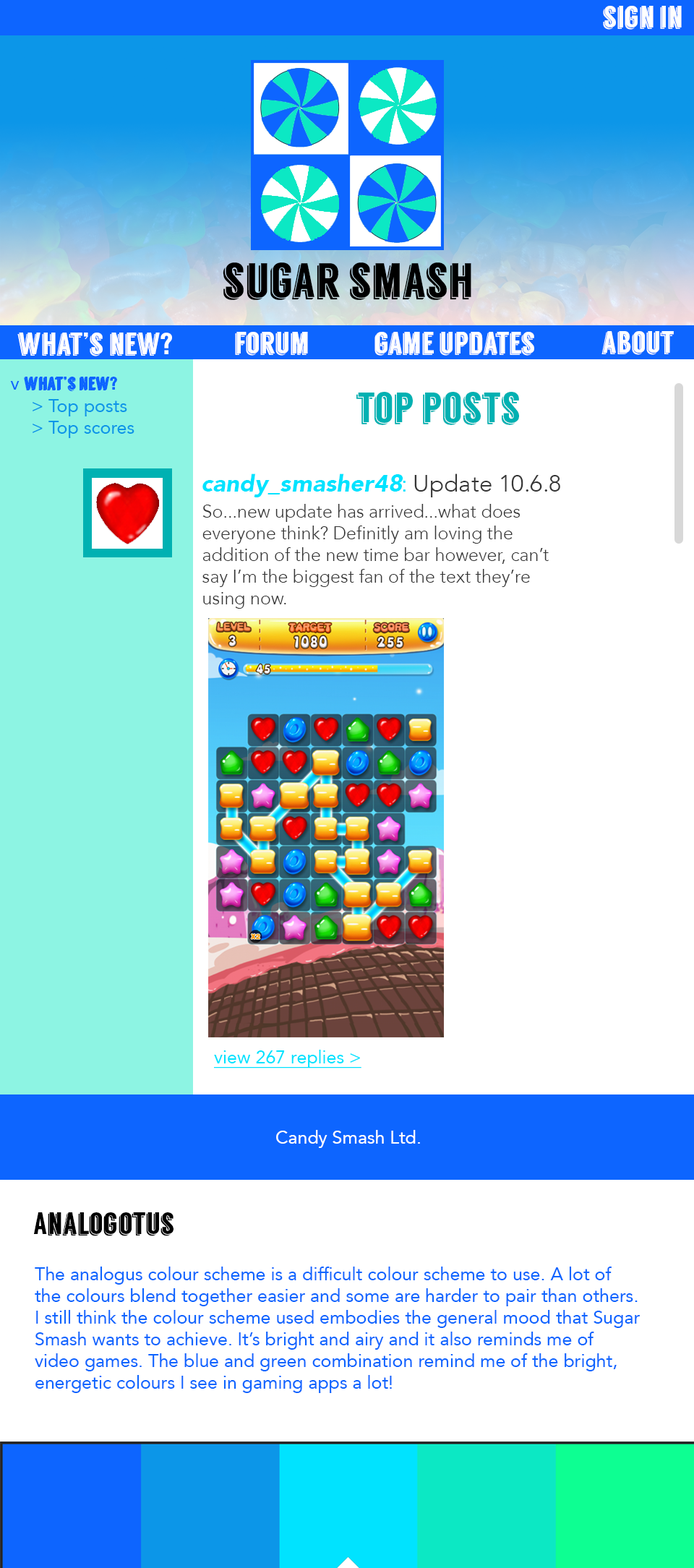
<style>
.page{position:relative;width:694px;height:1568px;background:#ffffff}
.page>*{position:absolute;margin:0}
.t1{font:30.1px "Langdon";color:#fefefe}
.t2{font:48.2px "Langdon";color:#000000}
.t3{font:30.1px "Langdon";color:#ffffff}
.t4{font:18.1px "Langdon";color:#0d65ff}
.t5{font:18.1px "Avenir-Roman";color:#0d65ff}
.t6{font:18.1px "Avenir-Roman";color:#0c96e8}
.t7{font:42.2px "Langdon";color:#00b1b2}
.t8{font:24.1px "Avenir-BlackOblique";color:#00e3ff}
.t9{font:24.1px "Cabin-Regular";color:#00e3ff}
.t10{font:24.1px "Avenir-Light";color:#363636}
.t11{font:18.1px "Avenir-Light";color:#363636}
.t12{font:18.1px "Avenir-Roman";color:#00e3ff;text-decoration:underline}
.t13{font:18.1px "Avenir-Roman";color:#ffffff}
.t14{font:30.1px "Langdon";color:#000000}
</style>
<div class="page">
<p class="t1" style="left:603px;top:6px;width:79px;height:24px">sign in</p>
<p class="t2" style="left:223px;top:262px;width:248px;height:38px">sugar smash</p>
<p class="t3" style="left:17px;top:333px;width:155px;height:23px">what’s new?</p>
<p class="t3" style="left:235px;top:332px;width:73px;height:24px">forum</p>
<p class="t3" style="left:374px;top:332px;width:160px;height:24px">game updates</p>
<p class="t3" style="left:601px;top:331px;width:73px;height:24px">about</p>
<p class="t4" style="left:10px;top:377px;width:107px;height:14px"><span class="t5">v </span>what’s new?</p>
<p class="t6" style="left:33px;top:399px;width:101px;height:39px">&gt; Top posts<br>&gt; Top scores</p>
<p class="t7" style="left:356px;top:392px;width:163px;height:33px">top posts</p>
<p class="t8" style="left:202px;top:474px;width:358px;height:23px">candy_smasher48<span class="t9">: </span><span class="t10">Update 10.6.8</span></p>
<p class="t11" style="left:202px;top:504px;width:347px;height:105px">So...new update has arrived...what does <br>everyone think? Definitly am loving the <br>addition of the new time bar however, can’t say I’m the biggest fan of the text they’re using now.</p>
<p class="t12" style="left:214px;top:1050px;width:147px;height:18px">view 267 replies &gt;</p>
<p class="t13" style="left:276px;top:1130px;width:144px;height:18px">Candy Smash Ltd.</p>
<p class="t14" style="left:34px;top:1212px;width:139px;height:24px">Analogotus</p>
<p class="t5" style="left:35px;top:1267px;width:605px;height:126px">The analogus colour scheme is a difficult colour scheme to use. A lot of the colours blend together easier and some are harder to pair than others.  I still think the colour scheme used embodies the general mood that Sugar Smash wants to achieve. It’s bright and airy and it also reminds me of       video games. The blue and green combination remind me of the bright, energetic colours I see in gaming apps a lot!</p>
</div>
